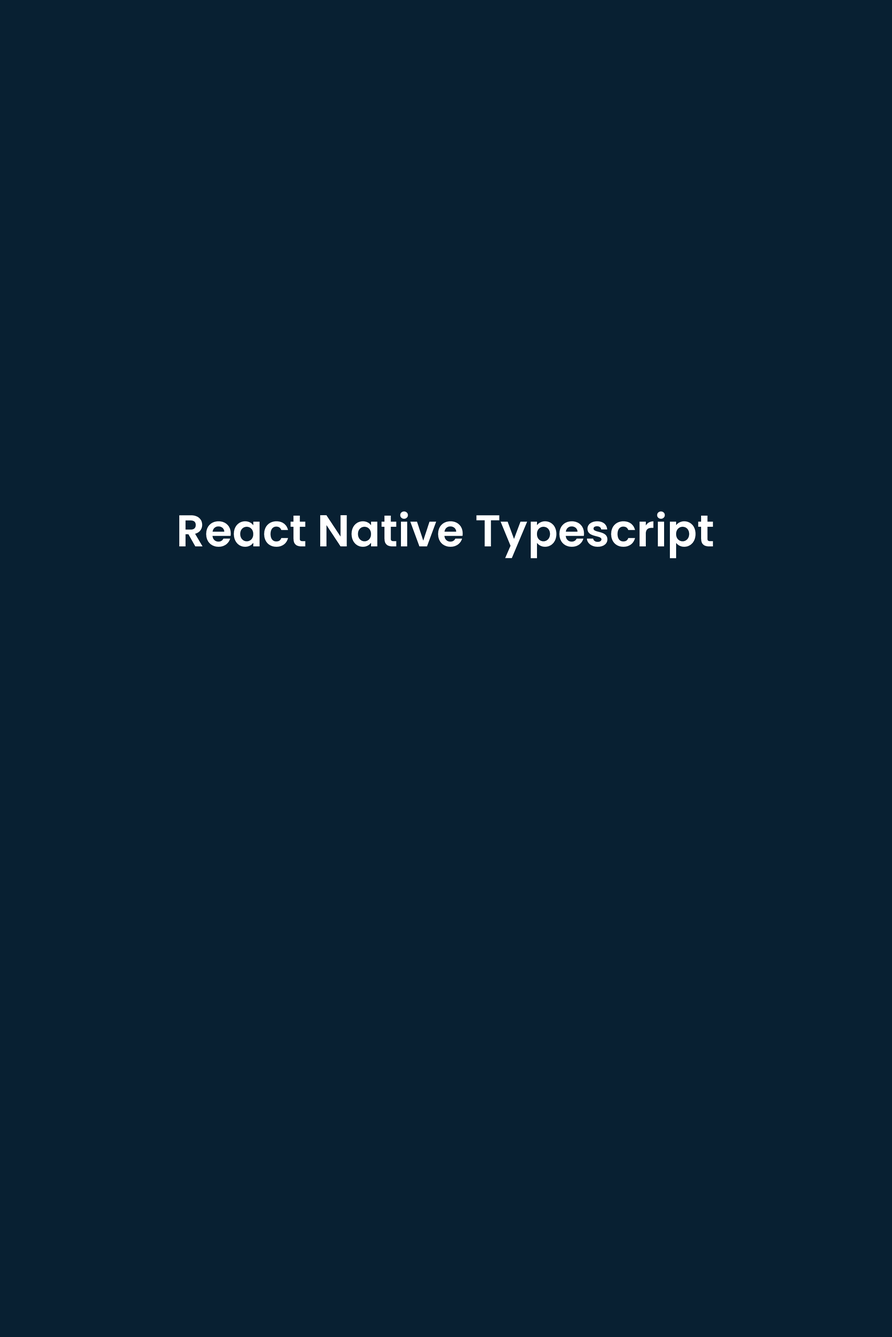
<style>
.page{position:relative;width:892px;height:1337px;background:#082032}
.page>*{position:absolute;margin:0}
.t1{font:44.6px "Poppins-SemiBold";color:#ffffff}
</style>
<div class="page">
<p class="t1" style="left:179px;top:511px;width:534px;height:48px">React Native Typescript</p>
</div>
